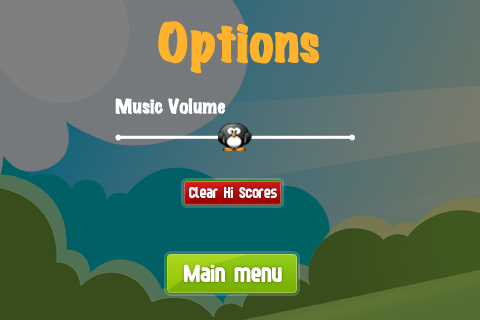
<style>
.page{position:relative;width:480px;height:320px}
.page>*{position:absolute;margin:0}
.t1{font:48.2px "MarkerFelt-Wide";color:#ffb22b;font-weight:bold}
.t2{font:18px "MarkerFelt-Wide";color:#ffffff;font-weight:bold}
.t3{font:14px "FontopoFONTOPO";color:#ffffff}
.t4{font:22px "FontopoFONTOPO";color:#ffffff}
</style>
<div class="page">
<p class="t1" style="left:158px;top:21px;width:161px;height:53px">Options</p>
<p class="t2" style="left:115px;top:98px;width:111px;height:16px">Music Volume</p>
<p class="t3" style="left:189px;top:187px;width:88px;height:11px">Clear Hi Scores</p>
<p class="t4" style="left:184px;top:264px;width:98px;height:18px">Main menu</p>
</div>
